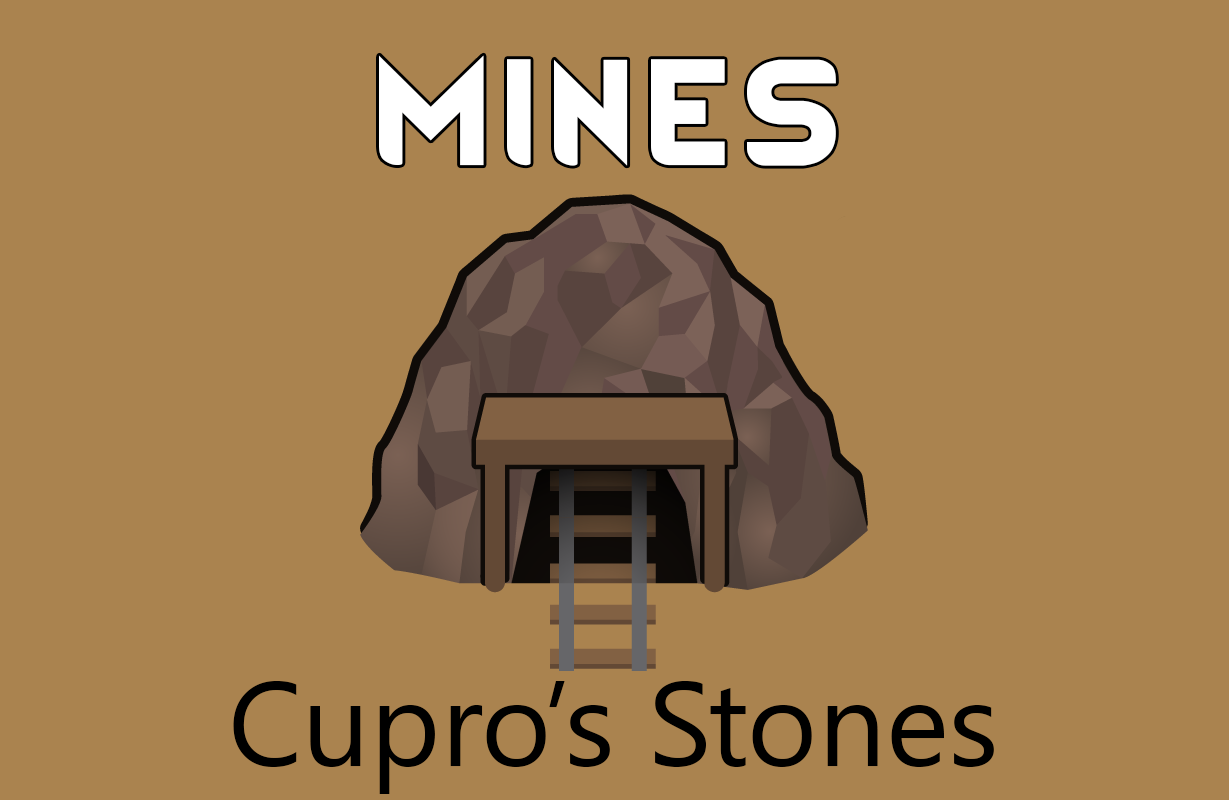
<style>
.page{position:relative;width:1229px;height:800px;background:#aa834f}
.page>*{position:absolute;margin:0}
.t1{font:120px "SegoeUISymbol";color:#000000}
</style>
<div class="page">
<p class="t1" style="left:233px;top:681px;width:761px;height:113px">Cupro’s Stones</p>
</div>
